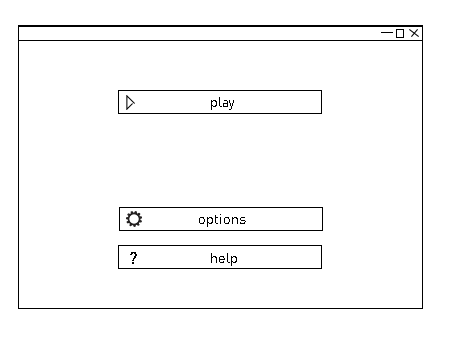
<style>
.page{position:relative;width:454px;height:340px;background:#ffffff}
.page>*{position:absolute;margin:0}
.t1{font:14px "Bahnschrift";color:#000000}
.t2{font:16.7px "Bahnschrift";color:#000000}
</style>
<div class="page">
<p class="t1" style="left:199px;top:97px;width:47px;height:169px">play<br><br><br><br><br><br><br>options<br><br>   help</p>
<p class="t2" style="left:130px;top:252px;width:7px;height:12px">?</p>
</div>
